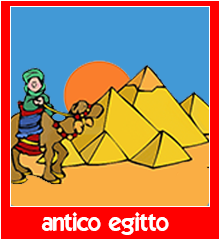
<style>
.page{position:relative;width:220px;height:240px;background:#4299d6}
.page>*{position:absolute;margin:0}
.t1{font:24px "ELEGANCE";color:#ffffff}
</style>
<div class="page">
<p class="t1" style="left:41px;top:212px;width:128px;height:23px">antico egitto</p>
</div>
